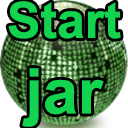
<style>
.page{position:relative;width:128px;height:128px}
.page>*{position:absolute;margin:0}
.t1{font:50px "Arial-BoldMT";color:#13d44e}
.t2{font:63px "Arial-BoldMT";color:#13d44e}
</style>
<div class="page">
<p class="t1" style="left:8px;top:1px;width:113px;height:126px;text-align:center">Start<br><span class="t2">jar</span></p>
</div>
